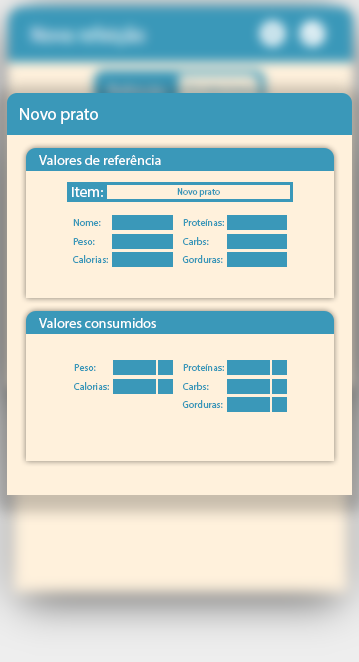
<style>
.page{position:relative;width:359px;height:662px;background:#fff1dc}
.page>*{position:absolute;margin:0}
.t1{font:17.5px "MyriadPro-Regular";color:#ffffff}
.t2{font:10.1px "MyriadPro-Regular";color:#3a98b9;scale:0.92 1}
.t3{font:13.8px "MyriadPro-Regular";color:#ffffff}
.t4{font:14.7px "MyriadPro-Regular";color:#ffffff}
.t5{font:9.2px "MyriadPro-Regular";color:#3a98b9}
.t6{font:10.2px "MyriadPro-Regular";color:#3a98b9}
.t7{font:10.1px "MyriadPro-Regular";color:#3a98b9}
.t8{font:10.3px "MyriadPro-Regular";color:#3a98b9}
.t9{font:10.3px "MyriadPro-Regular";color:#3a98b9;scale:0.97 1}
</style>
<div class="page">
<p class="t1" style="left:20px;top:108px;width:78px;height:16px">Novo prato</p>
<p class="t2" style="left:204px;top:145px;width:30px;height:10px">Almoço</p>
<p class="t3" style="left:39px;top:155px;width:122px;height:10px">Valores de referência</p>
<p class="t4" style="left:72px;top:187px;width:31px;height:10px">Item:</p>
<p class="t5" style="left:177px;top:188px;width:43px;height:9px">Novo prato</p>
<p class="t6" style="left:73px;top:219px;width:28px;height:7px">Nome:</p>
<p class="t6" style="left:183px;top:219px;width:41px;height:7px">Proteínas:</p>
<p class="t7" style="left:73px;top:238px;width:22px;height:7px">Peso:</p>
<p class="t7" style="left:183px;top:237px;width:26px;height:8px">Carbs:</p>
<p class="t8" style="left:73px;top:255px;width:35px;height:8px">Calorias:</p>
<p class="t8" style="left:182px;top:255px;width:41px;height:8px">Gorduras:</p>
<p class="t3" style="left:39px;top:318px;width:117px;height:10px">Valores consumidos</p>
<p class="t8" style="left:74px;top:364px;width:22px;height:7px">Peso:</p>
<p class="t6" style="left:183px;top:364px;width:41px;height:7px">Proteínas:</p>
<p class="t9" style="left:74px;top:382px;width:35px;height:8px">Calorias:</p>
<p class="t7" style="left:183px;top:382px;width:26px;height:8px">Carbs:</p>
<p class="t8" style="left:182px;top:400px;width:41px;height:8px">Gorduras:</p>
</div>
